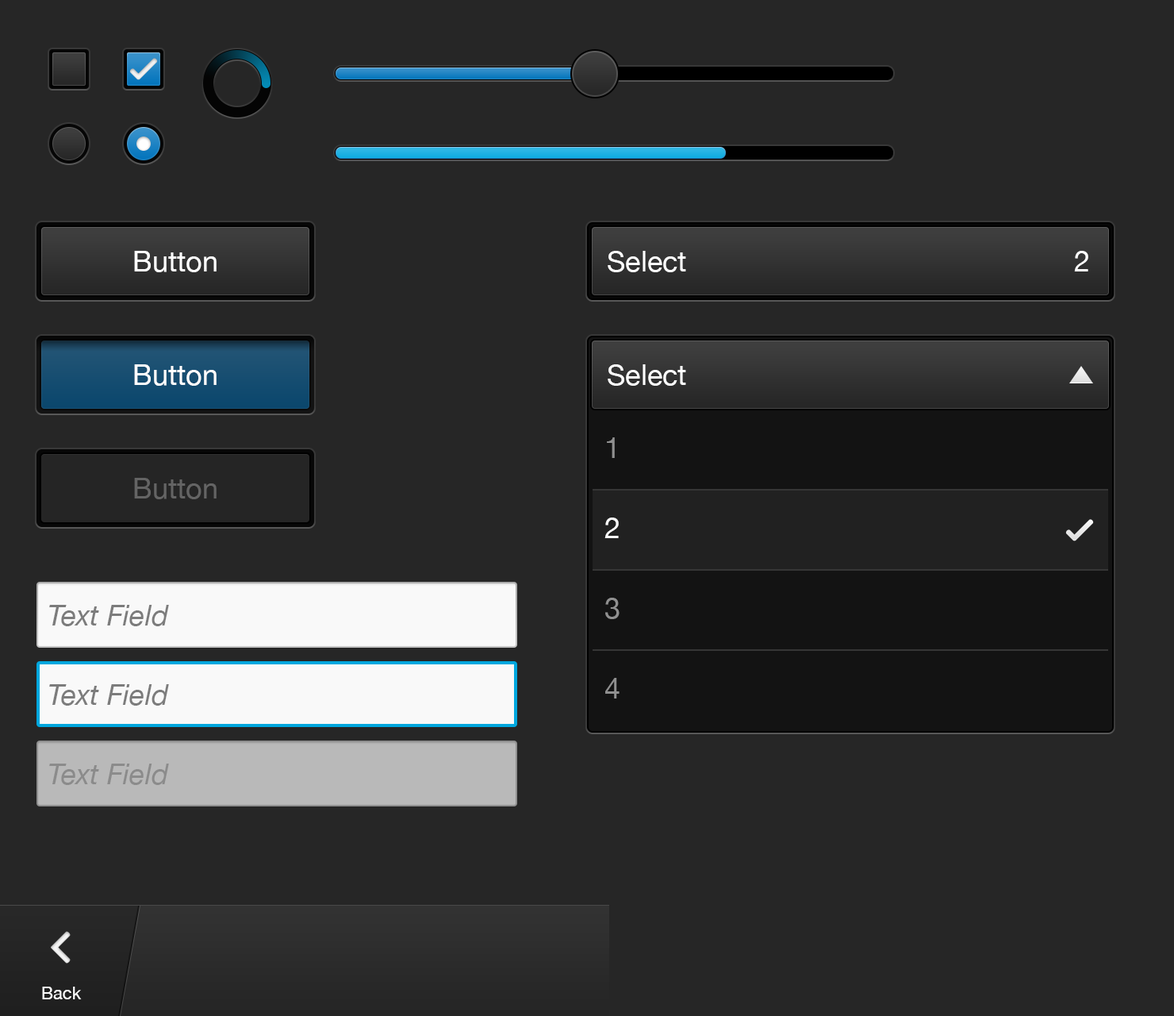
<style>
.page{position:relative;width:1174px;height:1016px;background:#262626}
.page>*{position:absolute;margin:0}
.t1{font:28.6px "HelveticaNeue";color:#ffffff}
.t2{font:28.6px/80.1px "HelveticaNeue";color:#909090}
.t3{font:28.6px/80.1px "HelveticaNeue";color:#fafafa}
.t4{font:28.6px "HelveticaNeue";color:#646464}
.t5{font:28.6px "HelveticaNeue-Italic";color:#7c7c7c}
.t6{font:28.6px "HelveticaNeue-Italic";color:#8b8b8b}
.t7{font:17.5px "HelveticaNeue";color:#ffffff}
</style>
<div class="page">
<p class="t1" style="left:134px;top:251px;width:83px;height:21px">Button</p>
<p class="t1" style="left:608px;top:251px;width:78px;height:21px">Select</p>
<p class="t1" style="left:1074px;top:251px;width:15px;height:20px">2</p>
<p class="t1" style="left:134px;top:364px;width:83px;height:22px">Button</p>
<p class="t1" style="left:608px;top:364px;width:78px;height:22px">Select</p>
<p class="t2" style="left:605px;top:437px;width:15px;height:261px;text-align:right">1<br><span class="t3">2<br></span>3<br>4</p>
<p class="t4" style="left:134px;top:478px;width:83px;height:21px">Button</p>
<p class="t5" style="left:49px;top:605px;width:120px;height:21px">Text Field</p>
<p class="t5" style="left:49px;top:684px;width:120px;height:21px">Text Field</p>
<p class="t6" style="left:49px;top:763px;width:120px;height:22px">Text Field</p>
<p class="t7" style="left:42px;top:986px;width:40px;height:13px">Back</p>
</div>
